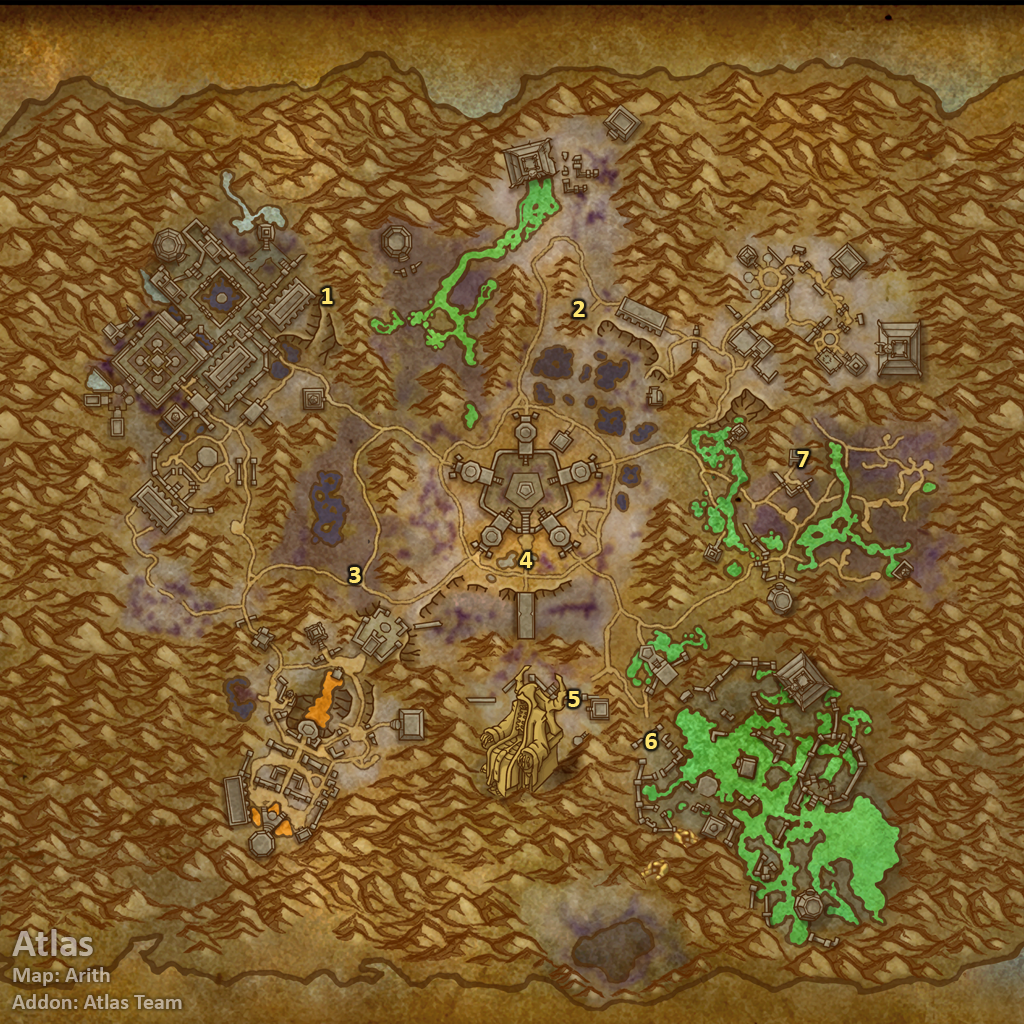
<style>
.page{position:relative;width:1024px;height:1024px}
.page>*{position:absolute;margin:0}
.t1{font:26px "Calibri-Bold";color:#fee570}
.t2{font:22px "Calibri-Bold";color:#b9aa94}
.t3{font:40px "Calibri-Bold";color:#b9aa94}
</style>
<div class="page">
<p class="t1" style="left:322px;top:288px;width:11px;height:16px">1</p>
<p class="t1" style="left:573px;top:301px;width:12px;height:16px">2</p>
<p class="t1" style="left:797px;top:451px;width:12px;height:16px">7</p>
<p class="t1" style="left:519px;top:552px;width:14px;height:16px">4</p>
<p class="t1" style="left:349px;top:567px;width:12px;height:16px">3</p>
<p class="t1" style="left:568px;top:691px;width:12px;height:16px">5</p>
<p class="t1" style="left:645px;top:733px;width:12px;height:16px">6</p>
<p class="t2" style="left:12px;top:929px;width:170px;height:80px"><span class="t3">Atlas<br></span>Map: Arith<br>Addon: Atlas Team</p>
</div>
